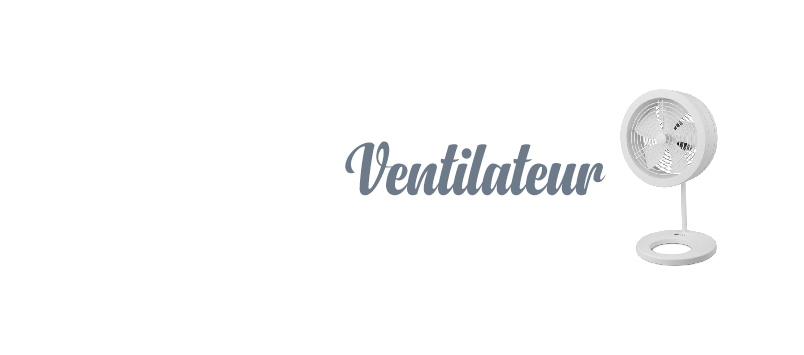
<style>
.page{position:relative;width:804px;height:355px;background:#ffffff}
.page>*{position:absolute;margin:0}
.t1{font:75px "Anydore";letter-spacing:-0.014em;color:#6c7a89}
</style>
<div class="page">
<p class="t1" style="left:345px;top:141px;width:261px;height:55px">Ventilateur</p>
</div>
